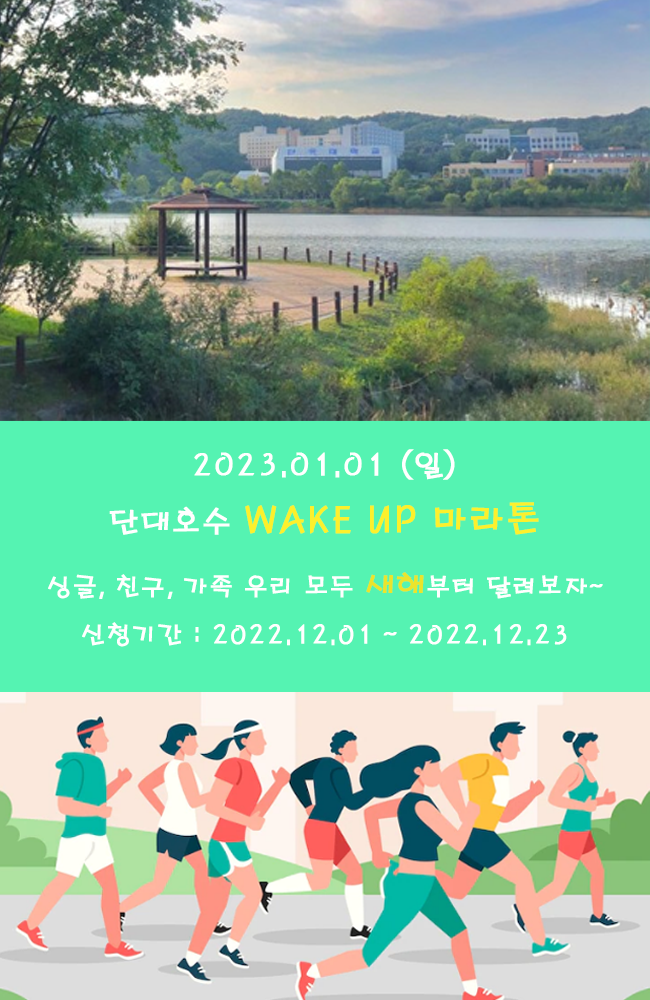
<style>
.page{position:relative;width:650px;height:1000px;background:#55f3b2}
.page>*{position:absolute;margin:0}
.t1{font:30px "H2porM";color:#ffffff;font-weight:bold}
.t2{font:36px "H2porM";color:#fcf02c;font-weight:bold}
.t3{font:25px "H2porM";color:#ffffff;font-weight:bold}
.t4{font:30px "H2porM";color:#ebe42b;font-weight:bold}
</style>
<div class="page">
<p class="t1" style="left:109px;top:449px;width:430px;height:86px;text-align:center">2023.01.01 (일)<br>단대호수 <span class="t2">WAKE UP 마라톤</span> 대회</p>
<p class="t3" style="left:48px;top:572px;width:555px;height:75px;text-align:center">싱글, 친구, 가족 우리 모두 <span class="t4">새해</span>부터 달려보자~<br>신청기간 : 2022.12.01 ~ 2022.12.23</p>
</div>
